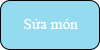
<style>
.page{position:relative;width:100px;height:50px;background:#94dbf0}
.page>*{position:absolute;margin:0}
.t1{font:15.3px "TimesNewRomanPSMT";color:#fefefe}
</style>
<div class="page">
<p class="t1" style="left:24px;top:19px;width:54px;height:10px">Sửa món</p>
</div>
